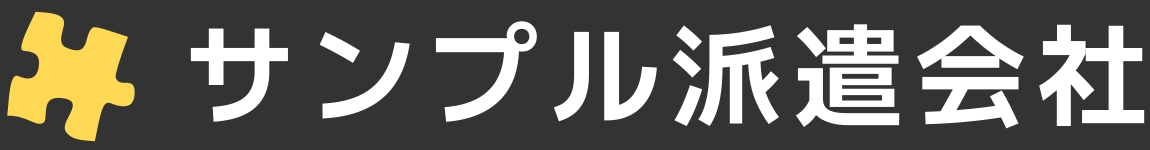
<style>
.page{position:relative;width:1150px;height:150px;background:#333333}
.page>*{position:absolute;margin:0}
.t1{font:111.2px "Murecho-SemiBold";letter-spacing:0.1em;color:#ffffff}
</style>
<div class="page">
<p class="t1" style="left:190px;top:21px;width:955px;height:108px">サンプル派遣会社</p>
</div>
